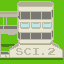
<style>
.page{position:relative;width:64px;height:64px;background:#64c310}
.page>*{position:absolute;margin:0}
.t1{font:8px "PressStart2P";color:#bebca8}
</style>
<div class="page">
<p class="t1" style="left:16px;top:48px;width:39px;height:7px">SCI.2</p>
</div>
